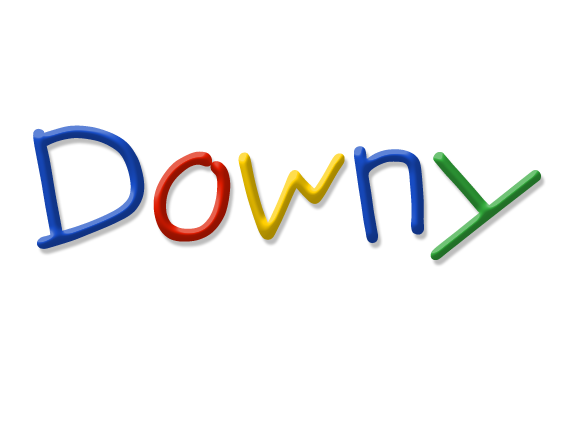
<style>
.page{position:relative;width:575px;height:431px;background:#ffffff}
.page>*{position:absolute;margin:0}
.t1{font:164px "JYaYa";font-weight:bold}
</style>
<div class="page">
<p class="t1" style="left:33px;top:125px;width:112px;height:124px">D</p>
<p class="t1" style="left:354px;top:146px;width:70px;height:98px">n</p>
<p class="t1" style="left:153px;top:151px;width:78px;height:91px">o</p>
<p class="t1" style="left:238px;top:152px;width:107px;height:88px">w</p>
<p class="t1" style="left:430px;top:152px;width:111px;height:108px">y</p>
</div>
